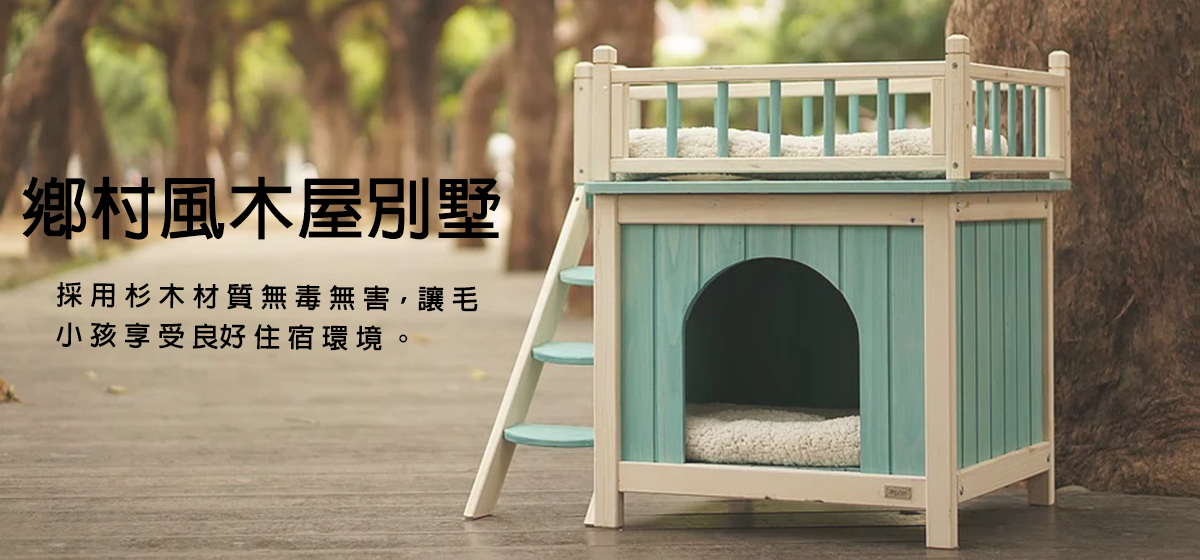
<style>
.page{position:relative;width:1200px;height:560px}
.page>*{position:absolute;margin:0}
.t1{font:67.2px "AdobeFanHeitiStd-Bold";color:#000000;font-weight:bold}
.t2{font:26.7px "AdobeFanHeitiStd-Bold";color:#000000;font-weight:bold}
</style>
<div class="page">
<p class="t1" style="left:22px;top:176px;width:479px;height:64px">鄉村風木屋別墅</p>
<p class="t2" style="left:56px;top:282px;width:422px;height:69px;rotate:1deg">採 用 杉 木 材 質 無 毒 無 害，讓 毛 小 孩 享 受 良好 住 宿 環 境 。</p>
</div>
